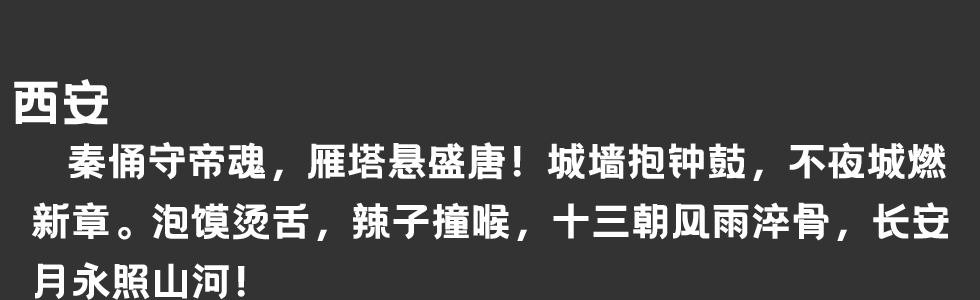
<style>
.page{position:relative;width:980px;height:300px;background:#333333}
.page>*{position:absolute;margin:0}
.t1{font:50px "HelloFont-WenYiHei";color:#ffffff}
.t2{font:40px/60px "HelloFont-WenYiHei";color:#ffffff}
</style>
<div class="page">
<p class="t1" style="left:14px;top:79px;width:94px;height:46px">西安</p>
<p class="t2" style="left:31px;top:142px;width:918px;height:158px">秦俑守帝魂，雁塔悬盛唐！城墙抱钟鼓，不夜城燃<br>新章。泡馍烫舌，辣子撞喉，十三朝风雨淬骨，长安<br>月永照山河！</p>
</div>
